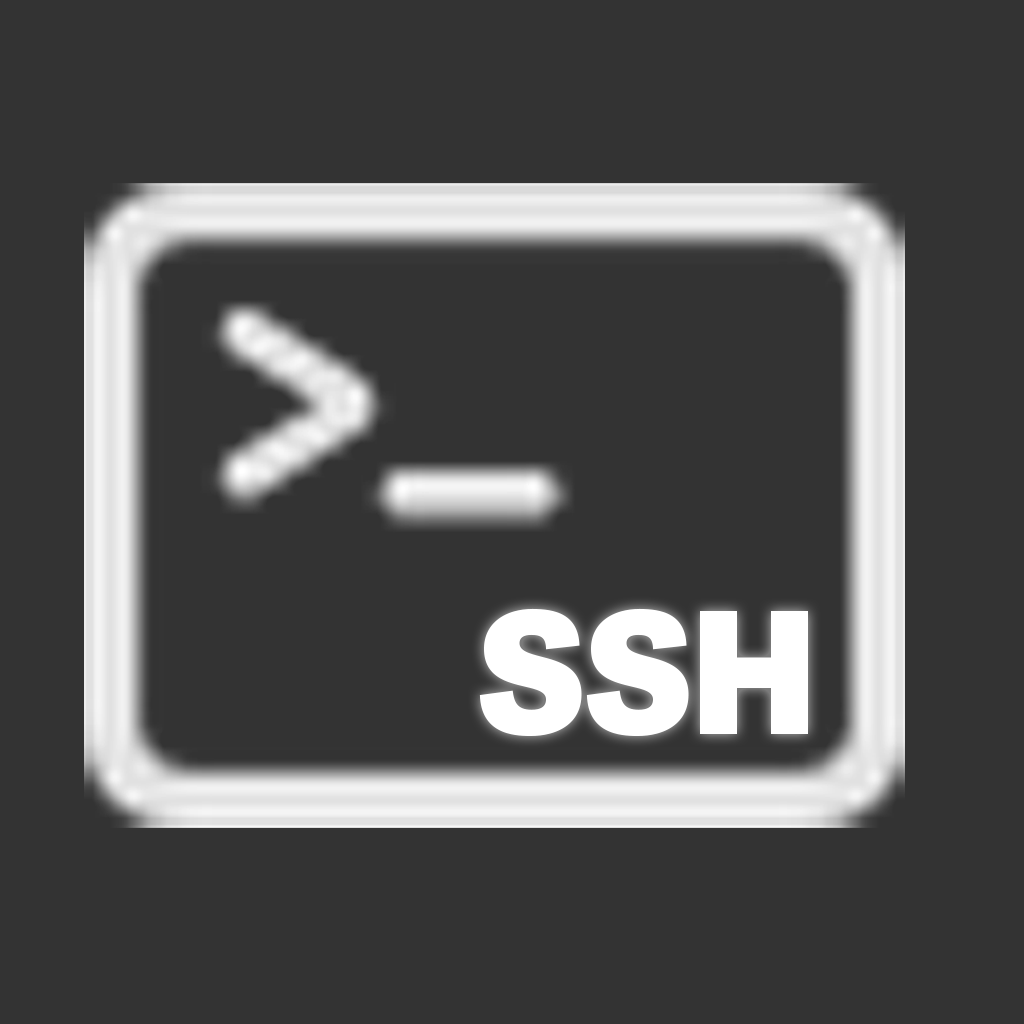
<style>
.page{position:relative;width:1024px;height:1024px;background:#333333}
.page>*{position:absolute;margin:0}
.t1{font:170.4px "AdelleSansDevanagari-Heavy";color:#ffffff}
</style>
<div class="page">
<p class="t1" style="left:479px;top:608px;width:329px;height:128px">SSH</p>
</div>
